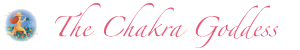
<style>
.page{position:relative;width:300px;height:50px;background:#ffffff}
.page>*{position:absolute;margin:0}
.t1{font:18px "Zapfino";color:#e85877}
</style>
<div class="page">
<p class="t1" style="left:54px;top:3px;width:225px;height:45px">The Chakra Goddess</p>
</div>
